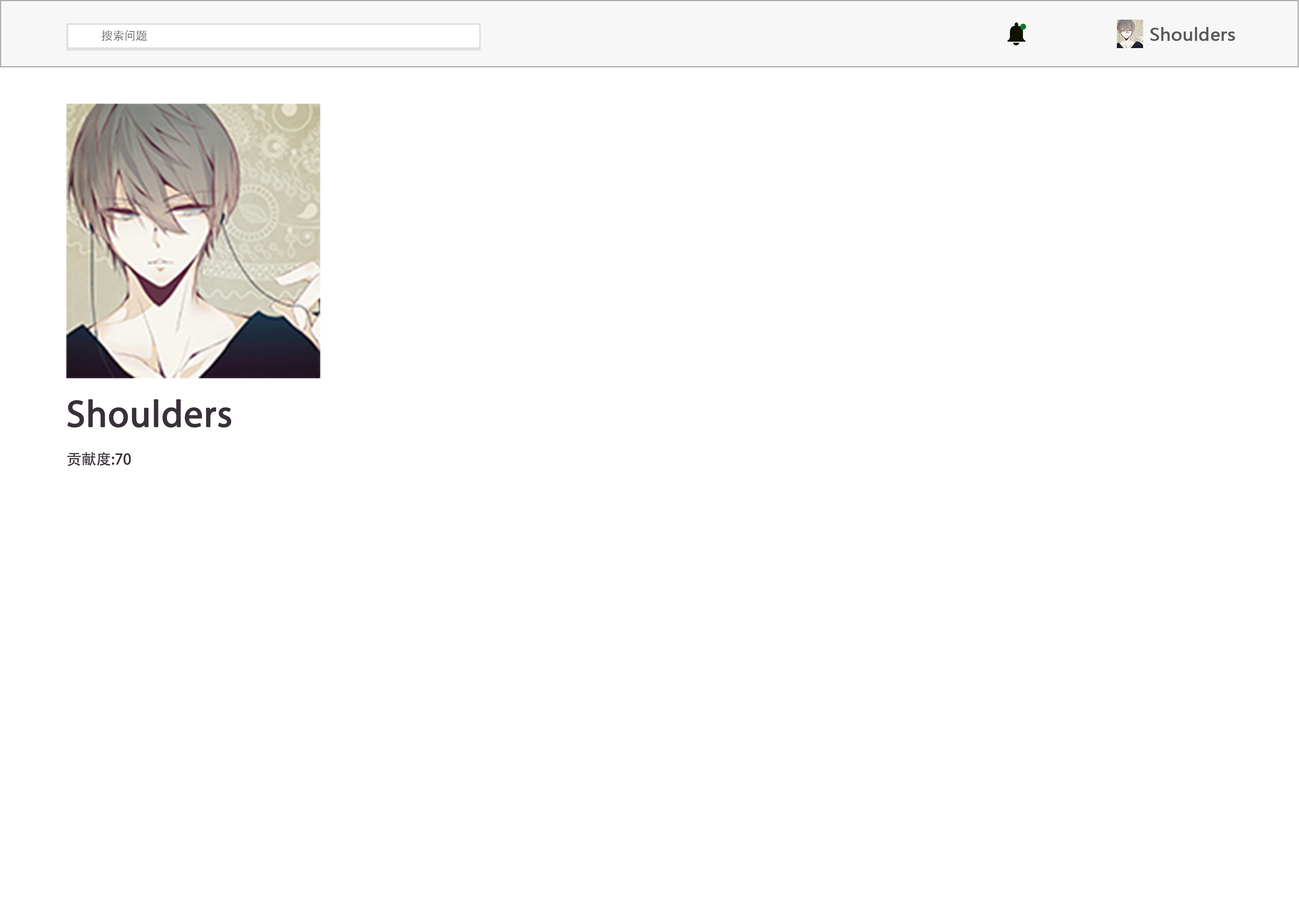
<style>
.page{position:relative;width:1299px;height:918px;background:#ffffff}
.page>*{position:absolute;margin:0}
.t1{font:11.4px "STHeitiSC-Light";color:#616161}
.t2{font:17.1px "MicrosoftYaHei";color:#595959;font-weight:bold}
.t3{font:37.8px "MyriadPro-Regular";color:#39313a;font-weight:bold}
.t4{font:14.8px "AdobeHeitiStd-Regular";color:#39313a}
</style>
<div class="page">
<p class="t1" style="left:101px;top:30px;width:46px;height:11px">搜索问题</p>
<p class="t2" style="left:1150px;top:27px;width:85px;height:14px">Shoulders</p>
<p class="t3" style="left:67px;top:399px;width:164px;height:29px">Shoulders</p>
<p class="t4" style="left:67px;top:452px;width:64px;height:14px">贡献度:70</p>
</div>
